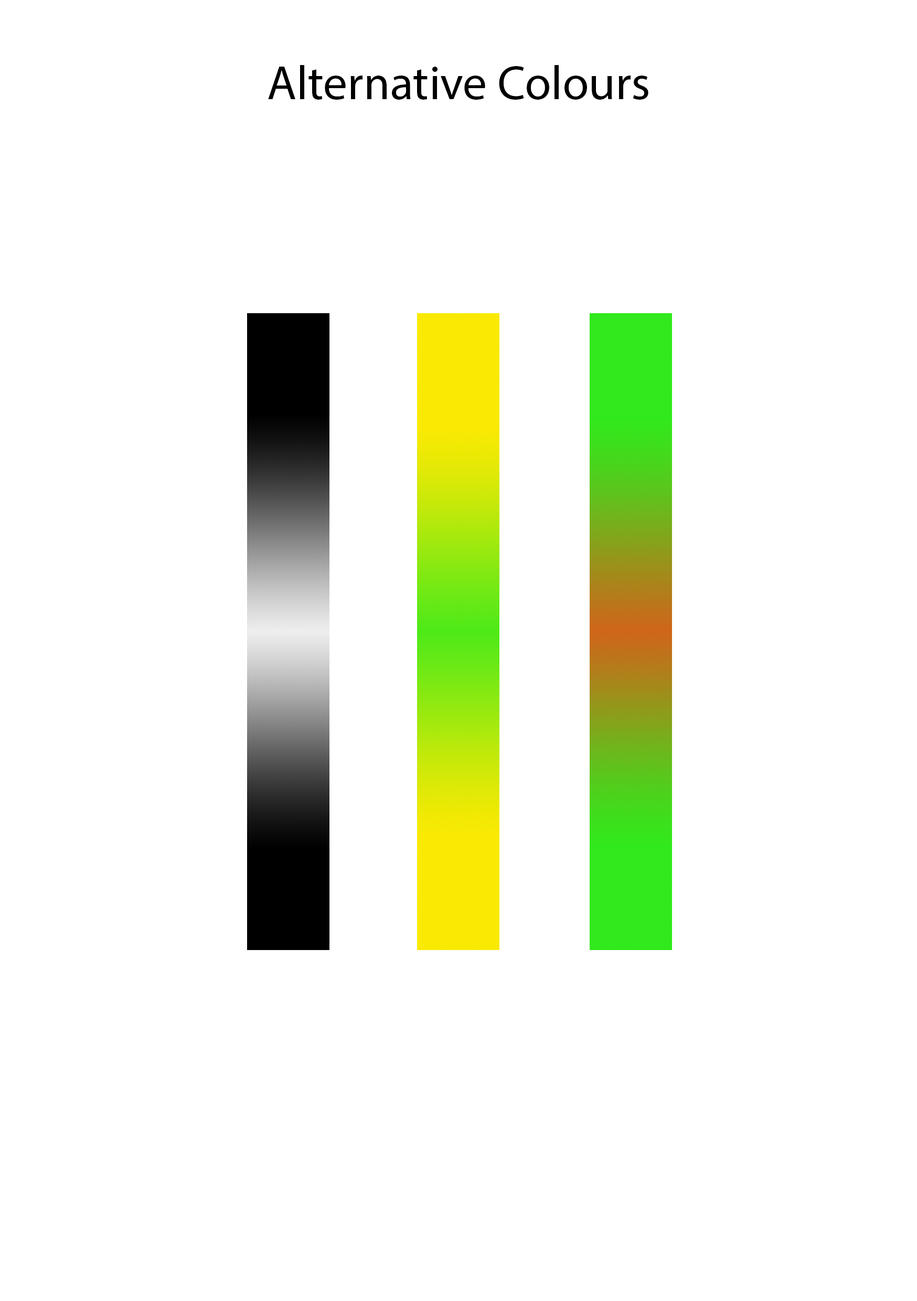
<style>
.page{position:relative;width:917px;height:1301px;background:#ffffff}
.page>*{position:absolute;margin:0}
.t1{font:48.1px "MyriadPro-Regular";color:#000000}
</style>
<div class="page">
<p class="t1" style="left:268px;top:65px;width:380px;height:35px">Alternative Colours</p>
</div>
